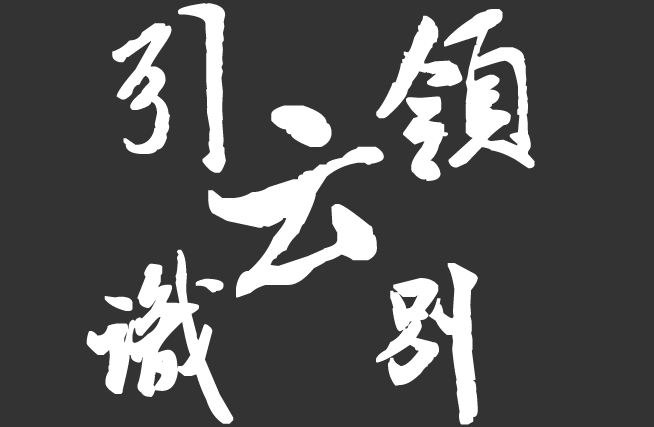
<style>
.page{position:relative;width:654px;height:427px;background:#333333}
.page>*{position:absolute;margin:0}
.t1{font:191px "ÊéÌå·»Ã×ÜÀÌå";letter-spacing:0.06em;color:#ffffff}
.t2{font:252px "ÊéÌå·»Ã×ÜÀÌå";letter-spacing:0.06em;color:#000000}
.t3{font:252px "ÊéÌå·»Ã×ÜÀÌå";letter-spacing:0.06em;color:#ffffff}
</style>
<div class="page">
<p class="t1" style="left:112px;top:3px;width:423px;height:178px"><span class="t2"><br></span>引 领</p>
<p class="t3" style="left:208px;top:105px;width:176px;height:193px">云</p>
<p class="t1" style="left:86px;top:249px;width:392px;height:176px"><span class="t3"><br></span>识 别</p>
</div>
